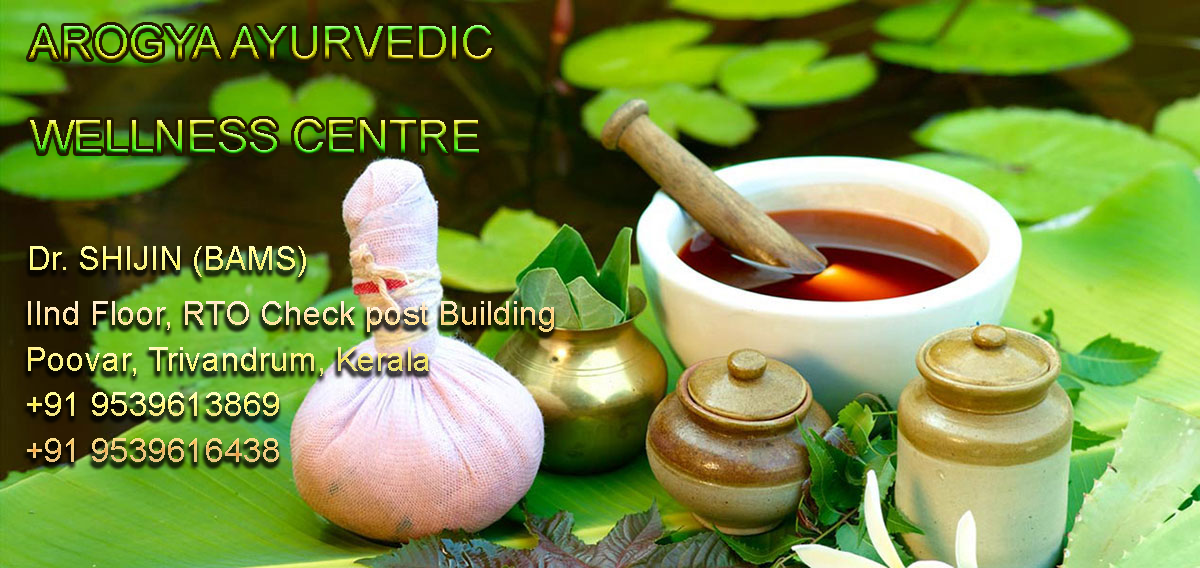
<style>
.page{position:relative;width:1200px;height:568px}
.page>*{position:absolute;margin:0}
.t1{font:45.8px/93.3px "ArialMT"}
.t2{font:33.3px "ArialMT"}
.t3{font:33.3px/45.8px "ArialMT"}
</style>
<div class="page">
<p class="t1" style="left:29px;top:25px;width:463px;height:129px">AROGYA AYURVEDIC <br>WELLNESS CENTRE</p>
<p class="t2" style="left:30px;top:246px;width:276px;height:31px">Dr. SHIJIN (BAMS)</p>
<p class="t3" style="left:27px;top:301px;width:527px;height:161px">IInd Floor, RTO Check post Building<br>Poovar, Trivandrum, Kerala<br>+91 9539613869<br>+91 9539616438</p>
</div>
